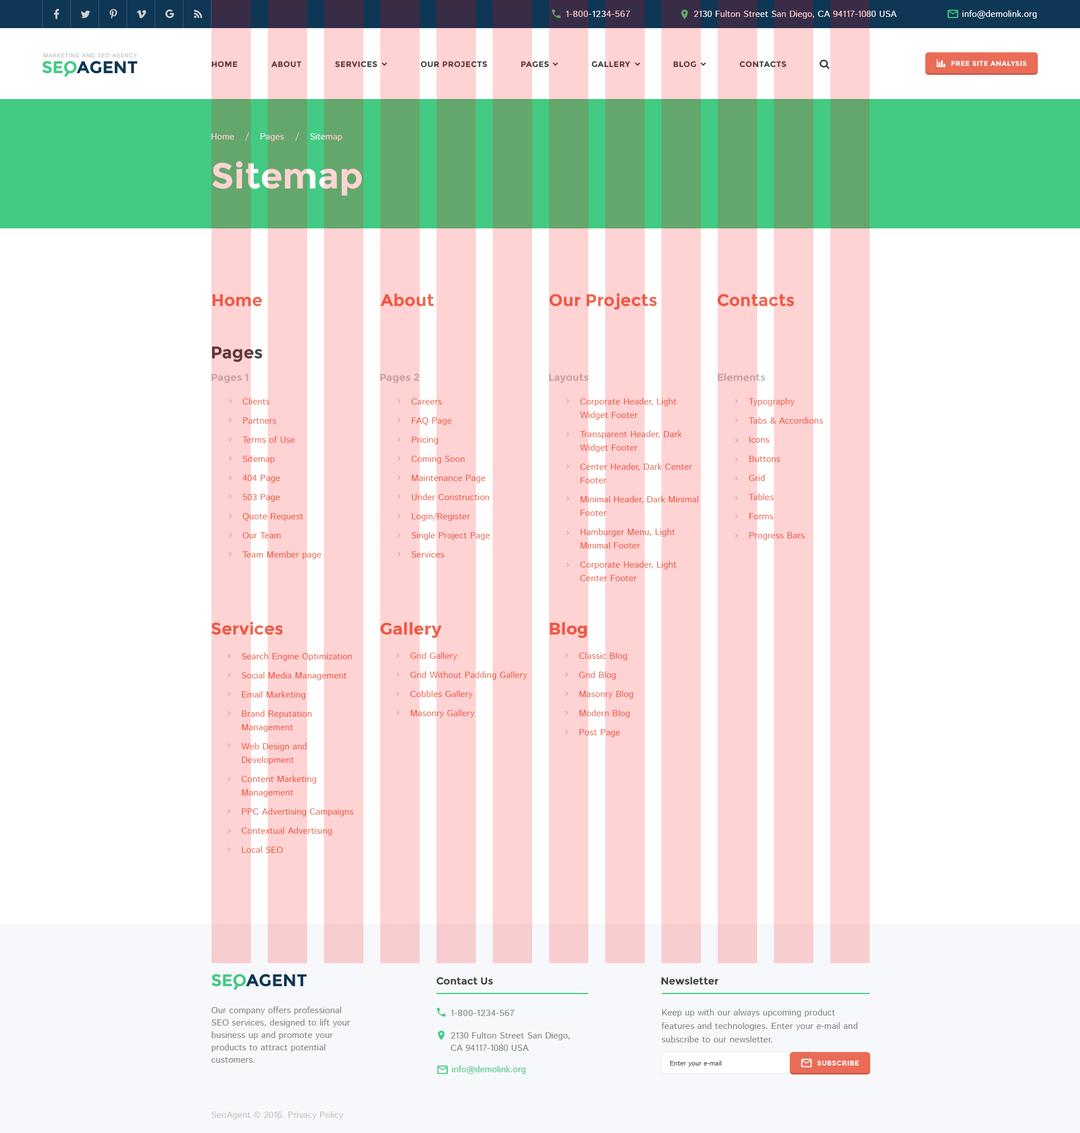
<style>
.page{position:relative;width:1080px;height:1133px;background:#ffffff}
.page>*{position:absolute;margin:0}
.t1{font:9px "IstokWeb-Regular";letter-spacing:0.04em;color:#ffd4d4;text-transform:uppercase}
.t2{font:9px "IstokWeb-Regular"}
.t3{font:9px "IstokWeb-Regular";color:#ffffff}
.t4{font:5.6px "IstokWeb-Regular";letter-spacing:0.08em;color:#c1c1c1;text-transform:uppercase}
.t5{font:16.9px "Montserrat-Bold";color:#43ca83}
.t6{font:16.9px "Montserrat-Bold";color:#0e3655}
.t7{font:7.9px "Montserrat-Bold";letter-spacing:0.04em;color:#633737;text-transform:uppercase}
.t8{font:7.9px "Montserrat-Bold";letter-spacing:0.04em;text-transform:uppercase}
.t9{font:6.7px "Montserrat-Bold";letter-spacing:0.04em;color:#ffffff;text-transform:uppercase}
.t10{font:9px "IstokWeb-Regular";color:#ffd3d3}
.t11{font:36px "Montserrat-Bold";color:#ffd3d3}
.t12{font:16.9px "Montserrat-Bold";color:#ea6c56}
.t13{font:16.9px "Montserrat-Bold";color:#633737}
.t14{font:10.1px "Montserrat-Bold";color:#cca0a0}
.t15{font:9px/13.5px "IstokWeb-Regular";color:#ea6c56}
.t16{font:10.1px "Montserrat-Bold";color:#424343}
.t17{font:9px/12.4px "IstokWeb-Regular";color:#7f7f7f}
.t18{font:9px "IstokWeb-Regular";letter-spacing:0.04em;color:#7f7f7f;text-transform:uppercase}
.t19{font:9px/13.5px "IstokWeb-Regular";color:#7f7f7f}
.t20{font:6.8px "IstokWeb-Regular";color:#424343}
.t21{font:9px "IstokWeb-Regular";color:#43ca83}
.t22{font:9px "IstokWeb-Regular";color:#c0c0c0}
</style>
<div class="page">
<p class="t1" style="left:566px;top:11px;width:64px;height:6px">1-800-1234-567</p>
<p class="t2" style="left:694px;top:10px;width:203px;height:9px">2130 Fulton Street San Diego, CA 94117-1080 USA</p>
<p class="t3" style="left:962px;top:10px;width:75px;height:9px">info@demolink.org</p>
<p class="t4" style="left:43px;top:53px;width:94px;height:4px">Marketing and SEO agency</p>
<p class="t5" style="left:42px;top:61px;width:34px;height:13px">SEO</p>
<p class="t6" style="left:76px;top:61px;width:61px;height:13px">AGENT</p>
<p class="t7" style="left:212px;top:61px;width:25px;height:7px">Home</p>
<p class="t7" style="left:271px;top:61px;width:31px;height:7px">about</p>
<p class="t8" style="left:335px;top:61px;width:42px;height:7px">services</p>
<p class="t8" style="left:421px;top:61px;width:66px;height:7px">our projects</p>
<p class="t8" style="left:521px;top:61px;width:28px;height:7px">pages</p>
<p class="t8" style="left:592px;top:61px;width:39px;height:7px">gallery</p>
<p class="t7" style="left:673px;top:61px;width:23px;height:7px">blog</p>
<p class="t8" style="left:740px;top:61px;width:46px;height:7px">contacts</p>
<p class="t9" style="left:951px;top:61px;width:76px;height:5px">Free Site Analysis</p>
<p class="t10" style="left:212px;top:133px;width:22px;height:7px">Home</p>
<p class="t2" style="left:245px;top:132px;width:4px;height:9px">/</p>
<p class="t10" style="left:260px;top:133px;width:24px;height:8px">Pages</p>
<p class="t2" style="left:295px;top:132px;width:4px;height:9px">/</p>
<p class="t2" style="left:310px;top:133px;width:33px;height:8px">Sitemap</p>
<p class="t11" style="left:212px;top:161px;width:150px;height:35px">Sitemap</p>
<p class="t12" style="left:380px;top:293px;width:54px;height:14px">About</p>
<p class="t12" style="left:550px;top:293px;width:107px;height:17px">Our Projects</p>
<p class="t12" style="left:717px;top:294px;width:77px;height:13px">Contacts</p>
<p class="t12" style="left:213px;top:294px;width:49px;height:13px">Home</p>
<p class="t13" style="left:212px;top:346px;width:50px;height:16px">Pages</p>
<p class="t14" style="left:212px;top:374px;width:36px;height:9px">Pages 1</p>
<p class="t14" style="left:380px;top:374px;width:39px;height:9px">Pages 2</p>
<p class="t14" style="left:549px;top:374px;width:40px;height:9px">Layouts</p>
<p class="t14" style="left:718px;top:373px;width:48px;height:8px">Elements</p>
<p class="t15" style="left:242px;top:398px;width:79px;height:161px">Clients<br>Partners<br>Terms of Use<br>Sitemap<br>404 Page<br>503 Page<br>Quote Request<br>Our Team<br>Team Member page</p>
<p class="t15" style="left:411px;top:398px;width:79px;height:159px">Careers<br>FAQ Page<br>Pricing<br>Coming Soon<br>Maintenance Page<br>Under Construction<br>Login/Register<br>Single Project Page<br>Services</p>
<p class="t15" style="left:580px;top:398px;width:119px;height:183px">Corporate Header, Light Widget Footer<br>Transparent Header, Dark Widget Footer<br>Center Header, Dark Center Footer<br>Minimal Header, Dark Minimal Footer<br>Hamburger Menu, Light Minimal Footer<br>Corporate Header, Light Center Footer</p>
<p class="t15" style="left:749px;top:398px;width:74px;height:142px">Typography<br>Tabs &amp; Accordions<br>Icons<br>Buttons<br>Grid<br>Tables<br>Forms<br>Progress Bars</p>
<p class="t12" style="left:211px;top:622px;width:72px;height:13px">Services</p>
<p class="t12" style="left:380px;top:622px;width:62px;height:16px">Gallery</p>
<p class="t12" style="left:550px;top:622px;width:37px;height:16px">Blog</p>
<p class="t15" style="left:241px;top:652px;width:112px;height:201px">Search Engine Optimization<br>Social Media Management<br>Email Marketing<br>Brand Reputation Management<br>Web Design and Development<br>Content Marketing Management<br>PPC Advertising Campaigns<br>Contextual Advertising<br>Local SEO</p>
<p class="t15" style="left:410px;top:652px;width:118px;height:66px">Grid Gallery<br>Grid Without Padding Gallery<br>Cobbles Gallery<br>Masonry Gallery</p>
<p class="t15" style="left:579px;top:652px;width:54px;height:85px">Classic Blog<br>Grid Blog<br>Masonry Blog<br>Modern Blog<br>Post Page</p>
<p class="t5" style="left:212px;top:974px;width:34px;height:13px">SEO</p>
<p class="t6" style="left:246px;top:974px;width:61px;height:13px">AGENT</p>
<p class="t16" style="left:436px;top:977px;width:57px;height:8px">Contact Us</p>
<p class="t16" style="left:662px;top:976px;width:56px;height:9px">Newsletter</p>
<p class="t17" style="left:212px;top:1006px;width:138px;height:57px">Our company offers professional SEO services, designed to lift your business up and promote your products to attract potential customers.</p>
<p class="t18" style="left:451px;top:1010px;width:64px;height:6px">1-800-1234-567</p>
<p class="t19" style="left:662px;top:1009px;width:196px;height:33px">Keep up with our always upcoming product features and technologies. Enter your e-mail and subscribe to our newsletter.</p>
<p class="t17" style="left:451px;top:1032px;width:119px;height:19px">2130 Fulton Street San Diego,<br>CA 94117-1080 USA</p>
<p class="t20" style="left:670px;top:1060px;width:52px;height:6px">Enter your e-mail</p>
<p class="t9" style="left:817px;top:1060px;width:42px;height:6px">subscribe</p>
<p class="t21" style="left:452px;top:1065px;width:73px;height:9px">info@demolink.org</p>
<p class="t22" style="left:212px;top:1111px;width:132px;height:8px">SeoAgent © 2016. Privacy Policy</p>
</div>
